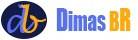
<style>
.page{position:relative;width:138px;height:40px;background:#ffffff}
.page>*{position:absolute;margin:0}
.t1{font:33.7px "LucidaHandwriting-Italic";color:#5971ec;scale:0.92 1}
.t2{font:33.7px "LucidaHandwriting-Italic";color:#fcaa0d;scale:0.92 1}
.t3{font:25.3px "Impact";color:#5971ec;scale:0.74 1}
.t4{font:29.2px "Impact";color:#5971ec;scale:0.74 1}
.t5{font:25.3px "Impact";color:#fcaa0d;scale:0.74 1}
.t6{font:29.2px "Impact";color:#fcaa0d;scale:0.74 1}
</style>
<div class="page">
<p class="t1" style="left:7px;top:4px;width:30px;height:29px">d</p>
<p class="t2" style="left:21px;top:4px;width:25px;height:29px">b</p>
<p class="t3" style="left:56px;top:8px;width:75px;height:23px"><span class="t4">D</span>imas <span class="t5">B</span><span class="t6">R</span></p>
</div>
